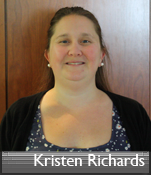
<style>
.page{position:relative;width:151px;height:175px}
.page>*{position:absolute;margin:0}
.t1{font:16.7px "GillSansMT";color:#fffefe}
</style>
<div class="page">
<p class="t1" style="left:34px;top:154px;width:111px;height:12px">Kristen Richards</p>
</div>
